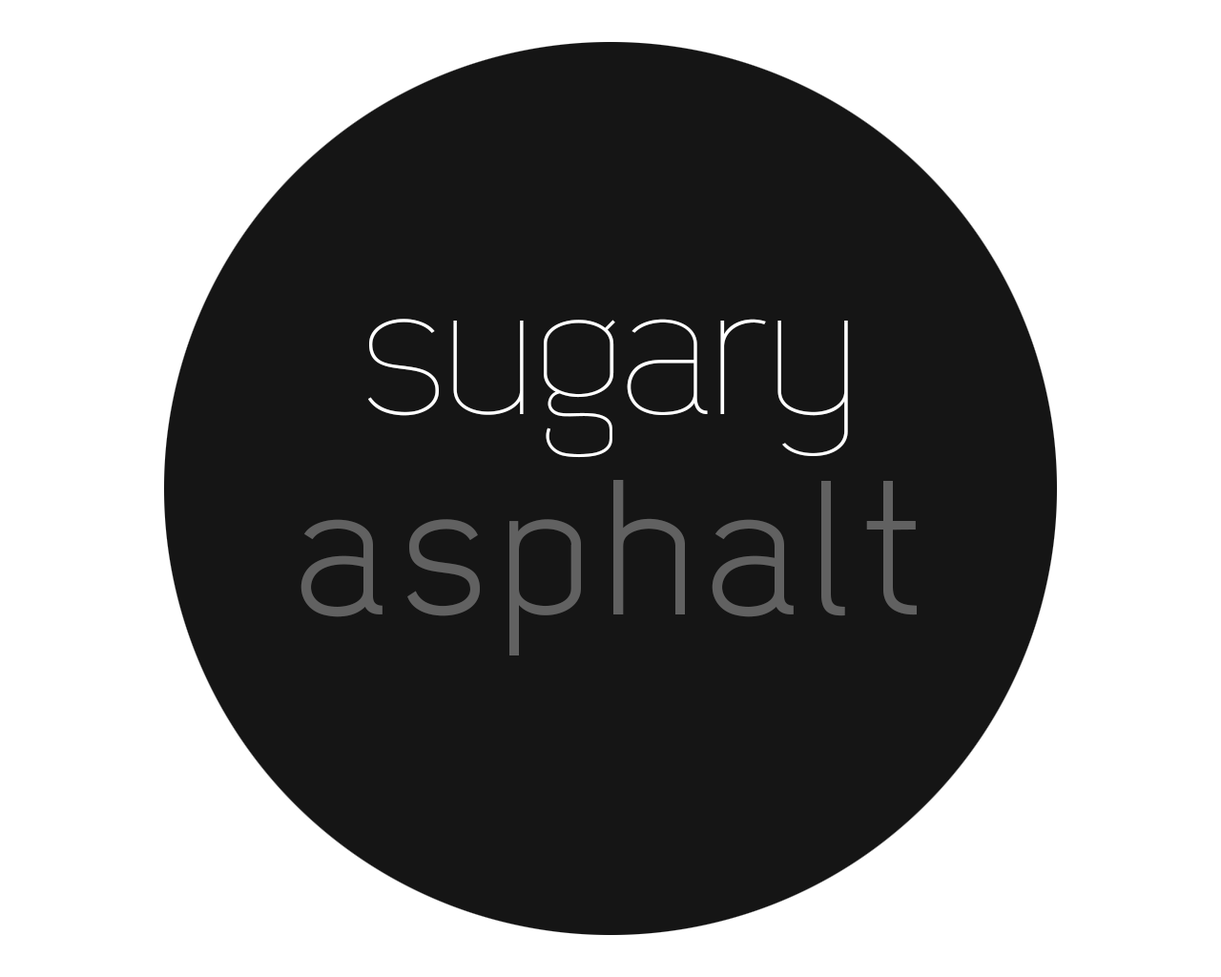
<style>
.page{position:relative;width:1221px;height:977px;background:#151515}
.page>*{position:absolute;margin:0}
.t1{font:190.8px/200.3px "Dekar";letter-spacing:0.075em;color:#616161}
.t2{font:190.8px/200.3px "Dekar-Light";color:#ffffff}
</style>
<div class="page">
<p class="t1" style="left:300px;top:319px;width:617px;height:336px;text-align:center"><span class="t2">sugary<br></span>asphalt</p>
</div>
